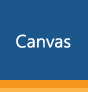
<style>
.page{position:relative;width:88px;height:92px;background:#1c578b}
.page>*{position:absolute;margin:0}
.t1{font:18px "SegoeUI";color:#ffffff}
</style>
<div class="page">
<p class="t1" style="left:16px;top:34px;width:55px;height:14px">Canvas</p>
</div>
